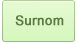
<style>
.page{position:relative;width:77px;height:42px}
.page>*{position:absolute;margin:0}
.t1{font:13.3px "ArialMT";color:#597d40;font-weight:bold}
</style>
<div class="page">
<p class="t1" style="left:15px;top:15px;width:49px;height:11px">Surnom</p>
</div>
